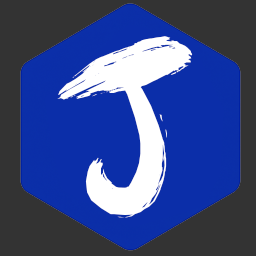
<style>
.page{position:relative;width:256px;height:256px;background:#333333}
.page>*{position:absolute;margin:0}
.t1{font:230.6px "BrushcrazyDEMO-Regular";color:#ffffff}
</style>
<div class="page">
<p class="t1" style="left:57px;top:36px;width:136px;height:182px">J</p>
</div>
